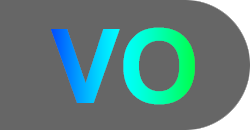
<style>
.page{position:relative;width:250px;height:130px;background:#666666}
.page>*{position:absolute;margin:0}
.t1{font:103.2px "Arial-BoldMT"}
</style>
<div class="page">
<p class="t1" style="left:51px;top:27px;width:144px;height:78px">VO</p>
</div>
